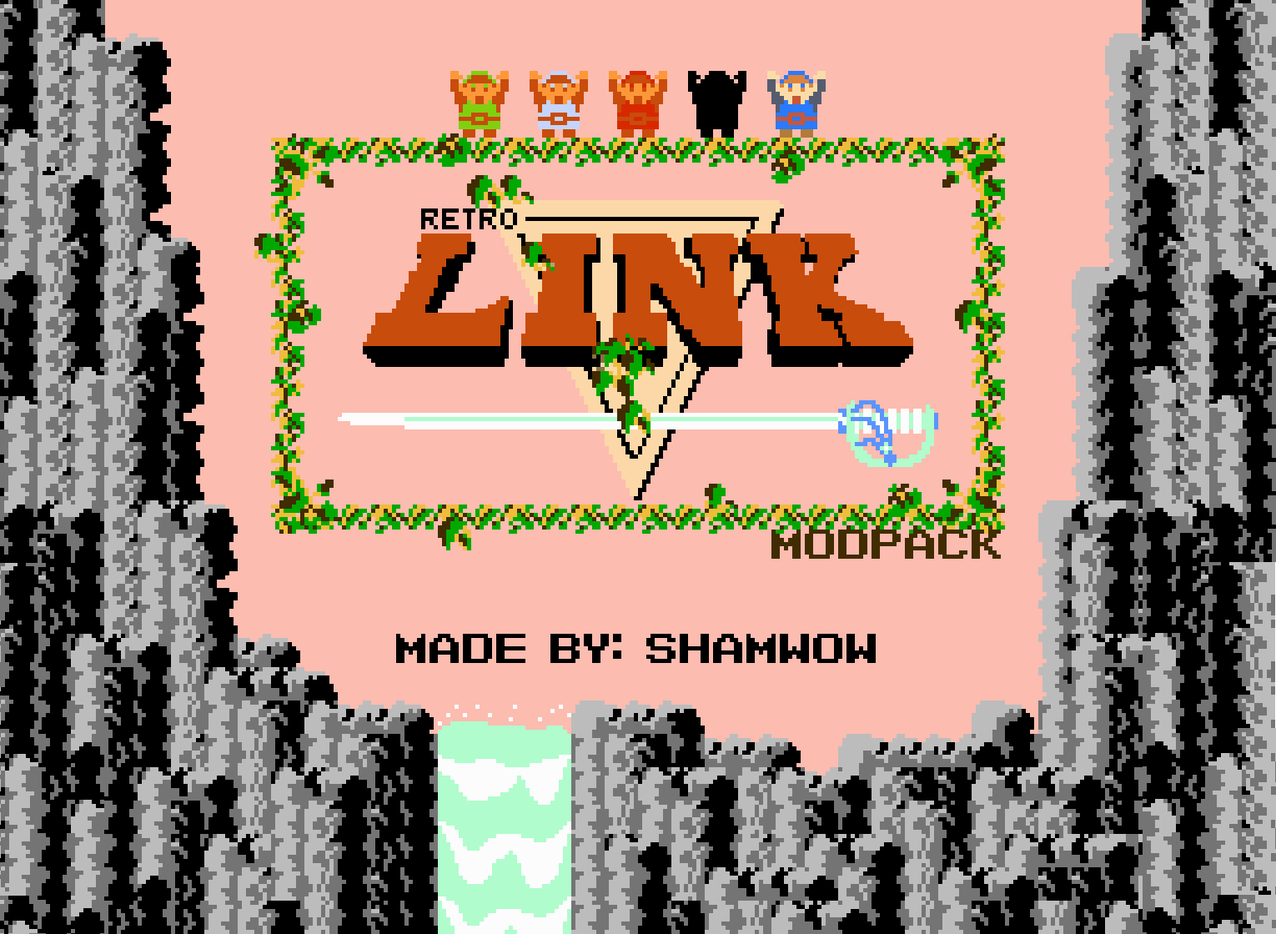
<style>
.page{position:relative;width:1276px;height:934px;background:#fcbcb0}
.page>*{position:absolute;margin:0}
.t1{font:29.2px "Barcade-Brawl";color:#402c00}
.t2{font:29.2px "Barcade-Brawl";color:#000000}
</style>
<div class="page">
<p class="t1" style="left:772px;top:530px;width:229px;height:29px">MODPack</p>
<p class="t2" style="left:396px;top:634px;width:480px;height:29px">Made by: Shamwow</p>
</div>
